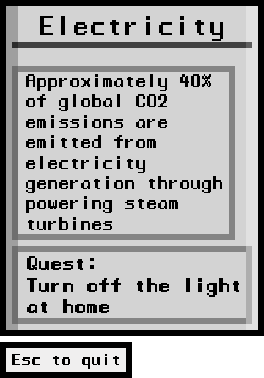
<style>
.page{position:relative;width:264px;height:378px;background:#d3d3d3}
.page>*{position:absolute;margin:0}
.t1{font:25px "ManaspaceReg";color:#000000}
.t2{font:17px "ManaspaceReg";color:#000000}
.t3{font:18px "ManaspaceReg";color:#000000}
</style>
<div class="page">
<p class="t1" style="left:40px;top:16px;width:183px;height:25px">Electricity</p>
<p class="t2" style="left:26px;top:74px;width:196px;height:156px">Approximately 40% of global CO2 emissions are emitted from electricity generation through powering steam turbines</p>
<p class="t3" style="left:27px;top:256px;width:212px;height:57px">Quest:<br>Turn off the light at home</p>
</div>
